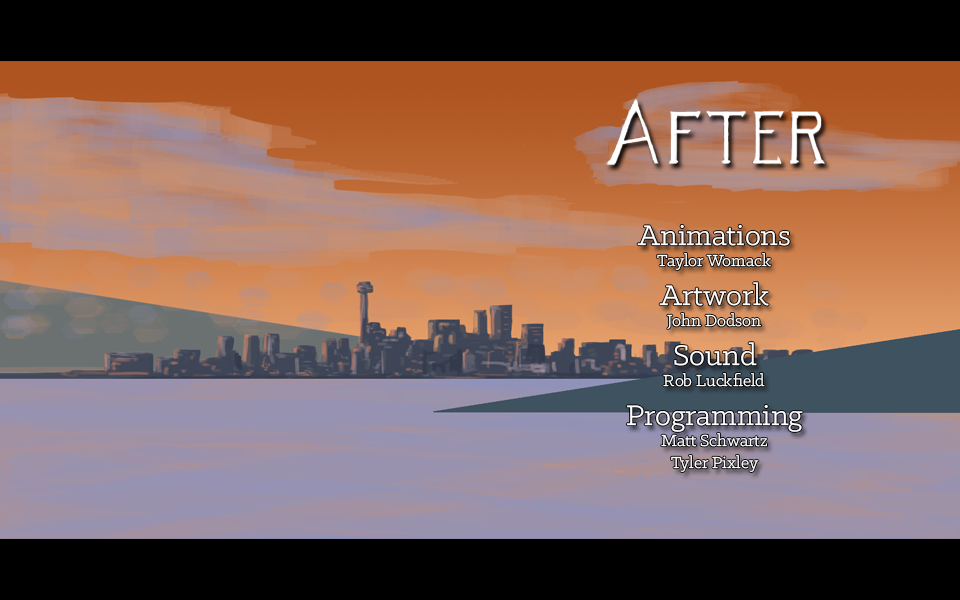
<style>
.page{position:relative;width:960px;height:600px;background:#000000}
.page>*{position:absolute;margin:0}
.t1{font:18px "KlinicSlab-Book";color:#ffffff}
.t2{font:32px "KlinicSlab-Book";color:#ffffff}
</style>
<div class="page">
<p class="t1" style="left:627px;top:224px;width:176px;height:248px;text-align:center"><span class="t2">Animations<br></span>Taylor Womack<br><span class="t2">Artwork<br></span>John Dodson<br><span class="t2">Sound<br></span>Rob Luckfield<br><span class="t2">Programming<br></span>Matt Schwartz<br>Tyler Pixley</p>
</div>
